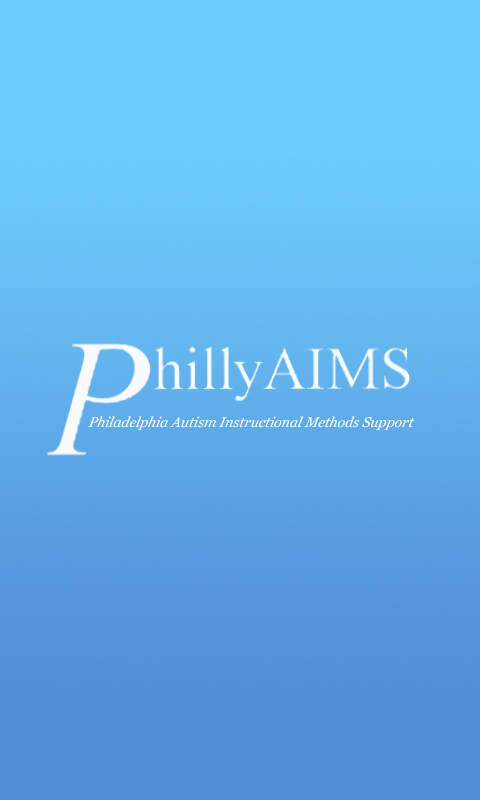
<style>
.page{position:relative;width:480px;height:800px}
.page>*{position:absolute;margin:0}
.t1{font:14px "Georgia-Italic";color:#ffffff;font-style:italic}
</style>
<div class="page">
<p class="t1" style="left:88px;top:416px;width:327px;height:14px">Philadelphia Autism Instructional Methods Support</p>
</div>
